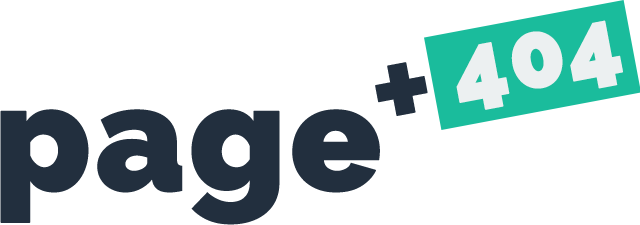
<style>
.page{position:relative;width:640px;height:225px;background:#ffffff}
.page>*{position:absolute;margin:0}
.t1{font:92.3px "Raleway-Black";color:#ecf0f1;font-weight:bold}
.t2{font:150px "Raleway-Bold";color:#222f3e;font-weight:bold}
.t3{font:150px "Raleway-Black";color:#222f3e;font-weight:bold}
</style>
<div class="page">
<p class="t1" style="left:456px;top:20px;width:167px;height:90px;rotate:-11deg">404</p>
<p class="t2" style="left:375px;top:62px;width:53px;height:54px;rotate:-11deg">+</p>
<p class="t3" style="left:0px;top:109px;width:380px;height:116px">page</p>
</div>
